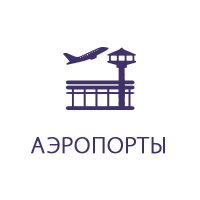
<style>
.page{position:relative;width:200px;height:200px;background:#ffffff}
.page>*{position:absolute;margin:0}
.t1{font:23.9px "MyriadPro-Light";letter-spacing:0.025em;color:#403168;font-variant:small-caps;font-weight:bold}
</style>
<div class="page">
<p class="t1" style="left:31px;top:137px;width:134px;height:17px">АЭРОПОРТЫ</p>
</div>
